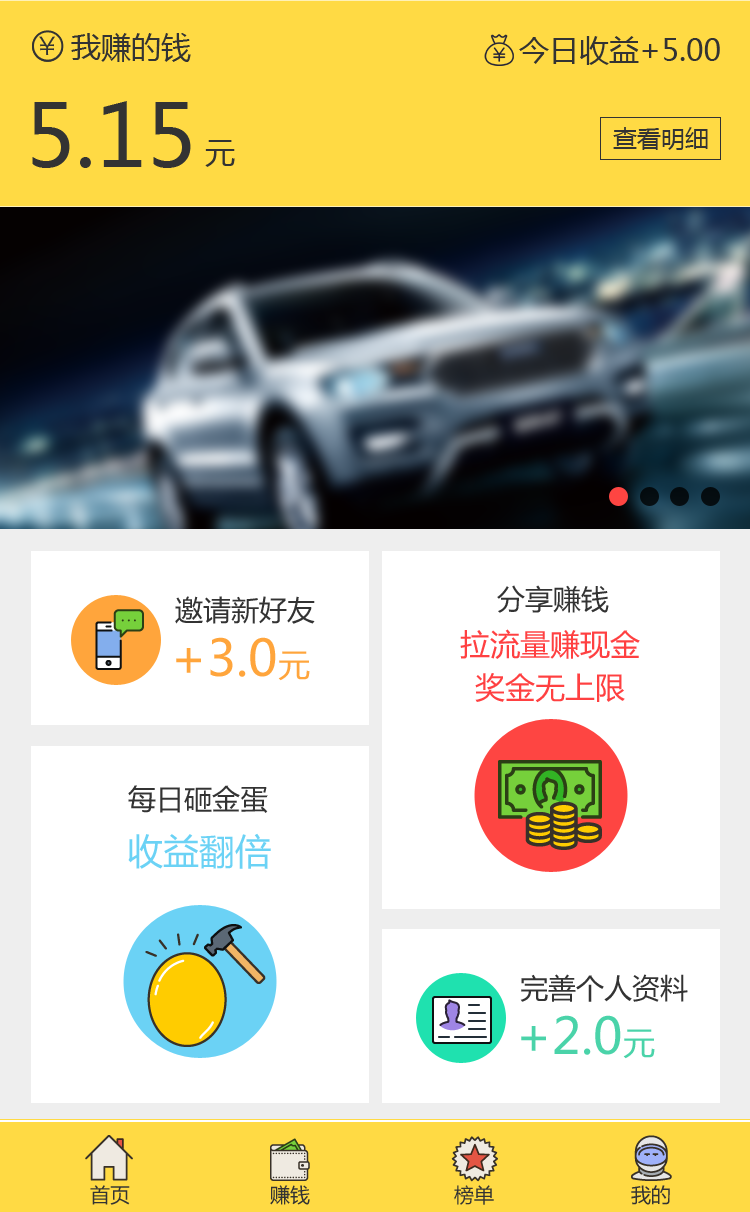
<style>
.page{position:relative;width:750px;height:1212px;background:#ffffff}
.page>*{position:absolute;margin:0}
.t1{font:24px "HiraginoSansGB-W3";color:#333333}
.t2{font:30px "MicrosoftYaHei";color:#333333}
.t3{font:86px "MicrosoftYaHei";color:#333333}
.t4{font:24px "MicrosoftYaHei";color:#333333}
.t5{font:28px "MicrosoftYaHei";color:#333333}
.t6{font:30px/43px "MicrosoftYaHei";color:#ff4041}
.t7{font:50px "MicrosoftYaHei";color:#ffa53c}
.t8{font:32px "MicrosoftYaHei";color:#ffa53c}
.t9{font:36px "MicrosoftYaHei";color:#6bd2f5}
.t10{font:50px "MicrosoftYaHei";color:#4ad3a9}
.t11{font:32px "MicrosoftYaHei";color:#4ad3a9}
.t12{font:20px "MicrosoftYaHei";color:#333333}
</style>
<div class="page">
<p class="t1" style="left:39px;top:36px;width:16px;height:19px">￥</p>
<p class="t2" style="left:71px;top:33px;width:120px;height:29px">我赚的钱</p>
<p class="t2" style="left:519px;top:36px;width:201px;height:29px">今日收益+5.00</p>
<p class="t3" style="left:32px;top:101px;width:159px;height:67px">5.15</p>
<p class="t4" style="left:613px;top:127px;width:95px;height:23px">查看明细</p>
<p class="t2" style="left:205px;top:140px;width:30px;height:27px">元</p>
<p class="t5" style="left:497px;top:585px;width:112px;height:28px">分享赚钱</p>
<p class="t5" style="left:175px;top:596px;width:140px;height:28px">邀请新好友</p>
<p class="t6" style="left:460px;top:629px;width:180px;height:74px;text-align:center">拉流量赚现金<br>奖金无上限</p>
<p class="t7" style="left:176px;top:637px;width:134px;height:44px">+3.0<span class="t8">元</span></p>
<p class="t5" style="left:128px;top:785px;width:140px;height:28px">每日砸金蛋</p>
<p class="t9" style="left:128px;top:833px;width:143px;height:36px">收益翻倍</p>
<p class="t5" style="left:520px;top:974px;width:168px;height:28px">完善个人资料</p>
<p class="t10" style="left:521px;top:1015px;width:134px;height:44px">+2.0<span class="t11">元</span></p>
<p class="t12" style="left:90px;top:1185px;width:40px;height:20px">首页</p>
<p class="t12" style="left:270px;top:1185px;width:40px;height:20px">赚钱</p>
<p class="t12" style="left:454px;top:1185px;width:40px;height:20px">榜单</p>
<p class="t12" style="left:631px;top:1185px;width:39px;height:20px">我的</p>
</div>
